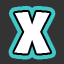
<style>
.page{position:relative;width:64px;height:64px;background:#333333}
.page>*{position:absolute;margin:0}
.t1{font:57.5px "Boulder-Regular";color:#ffffff;font-variant:small-caps}
</style>
<div class="page">
<p class="t1" style="left:14px;top:11px;width:37px;height:43px">X</p>
<p class="t1" style="left:14px;top:11px;width:37px;height:43px">X</p>
</div>
